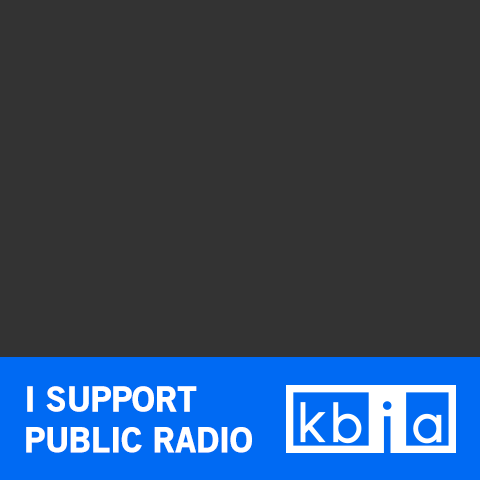
<style>
.page{position:relative;width:480px;height:480px;background:#333333}
.page>*{position:absolute;margin:0}
.t1{font:34px "OldSansBlack";color:#ffffff}
</style>
<div class="page">
<p class="t1" style="left:26px;top:386px;width:226px;height:67px">I SUPPORT<br>PUBLIC RADIO</p>
</div>
